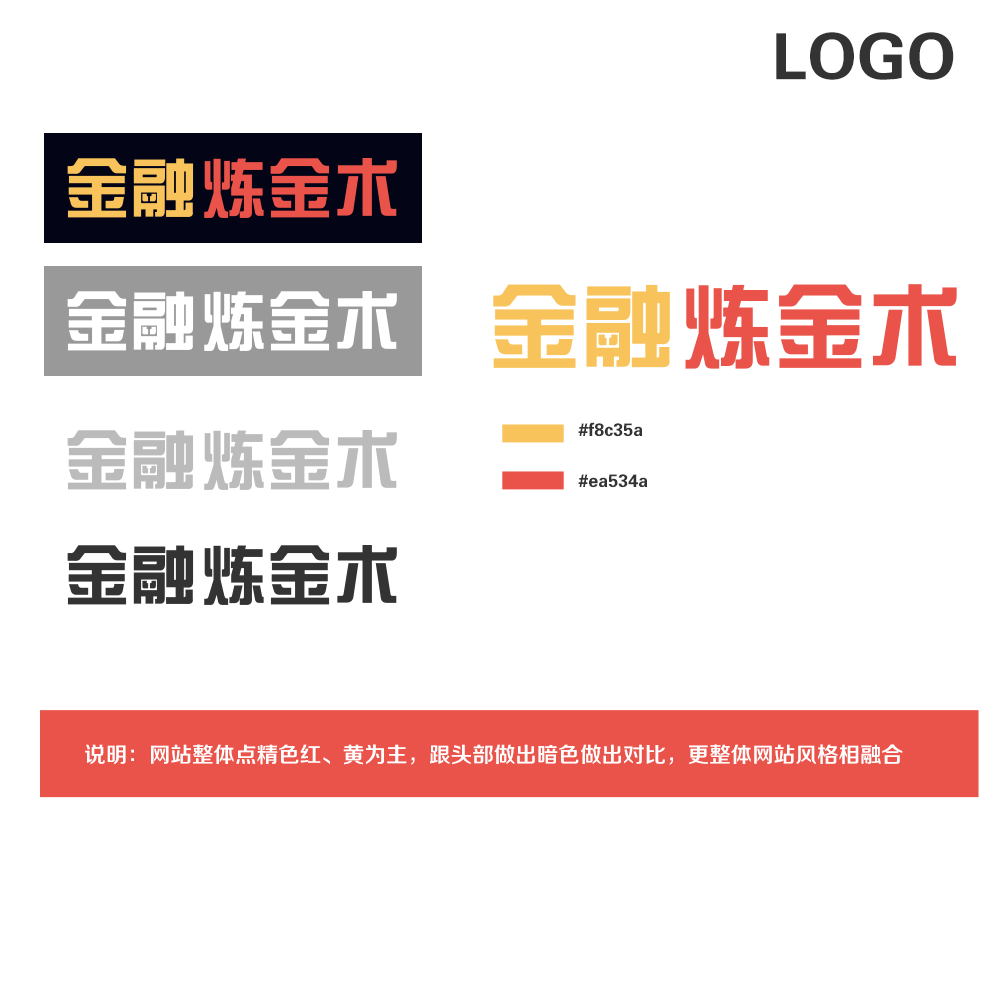
<style>
.page{position:relative;width:1000px;height:1000px;background:#ffffff}
.page>*{position:absolute;margin:0}
.t1{font:63.9px "FZZYK--GBK1-0";color:#333333}
.t2{font:18px "FZZYK--GBK1-0";color:#333333}
.t3{font:21.6px "FZZZHONGJW--GB1-0";color:#ffffff}
</style>
<div class="page">
<p class="t1" style="left:776px;top:32px;width:178px;height:48px">LOGO</p>
<p class="t2" style="left:578px;top:422px;width:65px;height:15px">#f8c35a</p>
<p class="t2" style="left:578px;top:474px;width:70px;height:14px">#ea534a</p>
<p class="t3" style="left:85px;top:744px;width:818px;height:21px">说明：网站整体点精色红、黄为主，跟头部做出暗色做出对比，更整体网站风格相融合</p>
</div>
